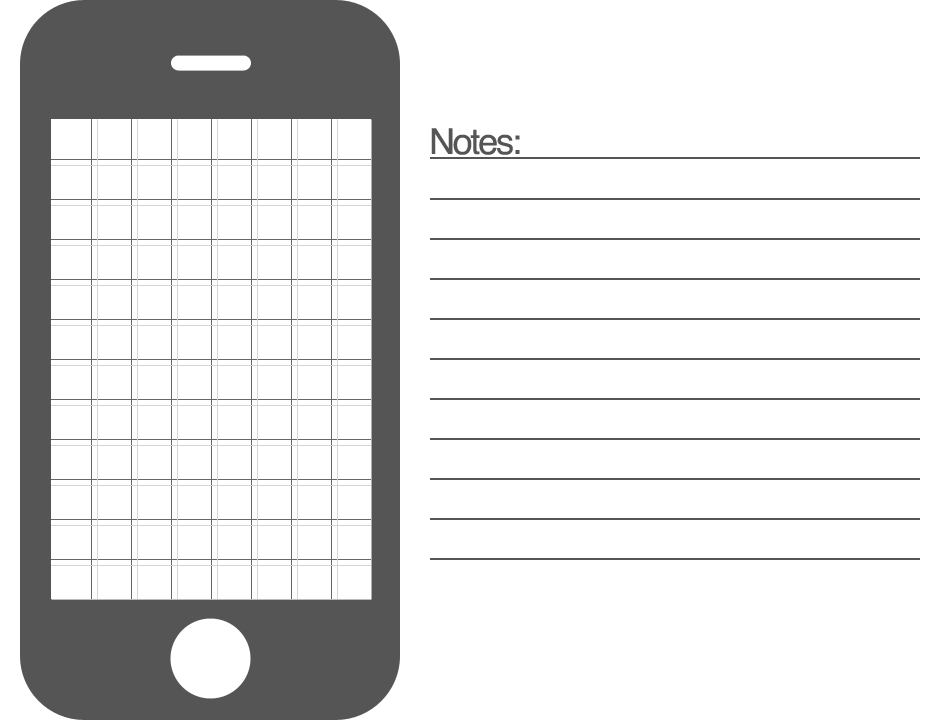
<style>
.page{position:relative;width:940px;height:720px;background:#ffffff}
.page>*{position:absolute;margin:0}
.t1{font:36px "Helvetica";letter-spacing:-0.09em;color:#555555;font-weight:bold}
</style>
<div class="page">
<p class="t1" style="left:431px;top:128px;width:89px;height:27px">Notes:</p>
</div>
